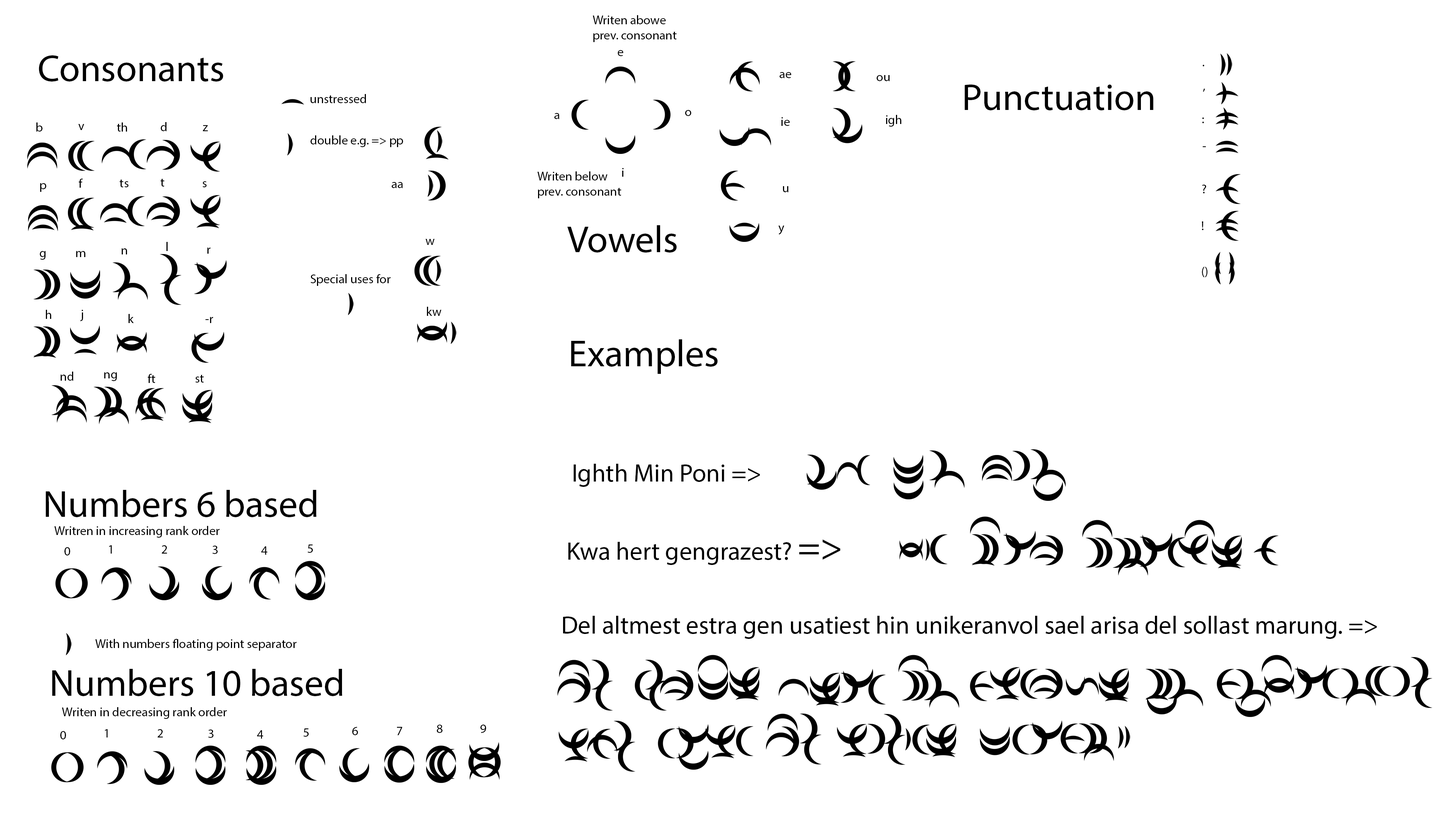
<style>
.page{position:relative;width:1456px;height:819px;background:#ffffff}
.page>*{position:absolute;margin:0}
.t1{font:12.6px "MyriadPro-Regular";color:#000000}
.t2{font:37.9px "MyriadPro-Regular";color:#000000}
.t3{font:25.3px "MyriadPro-Regular";color:#000000}
</style>
<div class="page">
<p class="t1" style="left:593px;top:15px;width:84px;height:27px">Writen abowe<br>prev. consonant</p>
<p class="t1" style="left:618px;top:50px;width:5px;height:6px">e</p>
<p class="t2" style="left:39px;top:55px;width:184px;height:27px">Consonants</p>
<p class="t1" style="left:1203px;top:64px;width:1px;height:2px">.</p>
<p class="t1" style="left:780px;top:72px;width:11px;height:6px">ae</p>
<p class="t1" style="left:877px;top:75px;width:13px;height:6px">ou</p>
<p class="t2" style="left:965px;top:85px;width:188px;height:25px">Punctuation</p>
<p class="t1" style="left:1203px;top:88px;width:2px;height:4px">,</p>
<p class="t1" style="left:311px;top:94px;width:55px;height:9px">unstressed</p>
<p class="t1" style="left:554px;top:113px;width:5px;height:6px">a</p>
<p class="t1" style="left:685px;top:110px;width:6px;height:6px">o</p>
<p class="t1" style="left:36px;top:122px;width:6px;height:10px">b</p>
<p class="t1" style="left:78px;top:124px;width:6px;height:6px">v</p>
<p class="t1" style="left:117px;top:122px;width:10px;height:10px">th</p>
<p class="t1" style="left:161px;top:122px;width:5px;height:9px">d</p>
<p class="t1" style="left:203px;top:125px;width:5px;height:6px">z</p>
<p class="t1" style="left:781px;top:117px;width:9px;height:9px">ie</p>
<p class="t1" style="left:886px;top:115px;width:15px;height:12px">igh</p>
<p class="t1" style="left:1202px;top:117px;width:2px;height:6px">:</p>
<p class="t1" style="left:311px;top:135px;width:92px;height:12px">double e.g. =&gt; pp</p>
<p class="t1" style="left:1203px;top:146px;width:3px;height:1px">-</p>
<p class="t1" style="left:537px;top:171px;width:84px;height:27px">Writen below<br>prev. consonant</p>
<p class="t1" style="left:622px;top:168px;width:2px;height:9px">i</p>
<p class="t1" style="left:40px;top:183px;width:6px;height:9px">p</p>
<p class="t1" style="left:78px;top:179px;width:5px;height:9px">f</p>
<p class="t1" style="left:119px;top:179px;width:10px;height:8px">ts</p>
<p class="t1" style="left:160px;top:179px;width:5px;height:8px">t</p>
<p class="t1" style="left:202px;top:181px;width:5px;height:6px">s</p>
<p class="t1" style="left:392px;top:182px;width:11px;height:6px">aa</p>
<p class="t1" style="left:1202px;top:185px;width:4px;height:8px">?</p>
<p class="t1" style="left:783px;top:186px;width:5px;height:6px">u</p>
<p class="t1" style="left:1202px;top:221px;width:1px;height:9px">!</p>
<p class="t2" style="left:567px;top:225px;width:110px;height:28px">Vowels</p>
<p class="t1" style="left:778px;top:226px;width:6px;height:9px">y</p>
<p class="t1" style="left:425px;top:239px;width:10px;height:6px">w</p>
<p class="t1" style="left:40px;top:251px;width:5px;height:9px">g</p>
<p class="t1" style="left:76px;top:251px;width:9px;height:6px">m</p>
<p class="t1" style="left:122px;top:248px;width:5px;height:6px">n</p>
<p class="t1" style="left:207px;top:248px;width:3px;height:6px">r</p>
<p class="t1" style="left:1202px;top:267px;width:6px;height:10px">()</p>
<p class="t1" style="left:311px;top:274px;width:80px;height:12px">Special uses for</p>
<p class="t1" style="left:46px;top:310px;width:5px;height:9px">h</p>
<p class="t1" style="left:80px;top:310px;width:3px;height:11px">j</p>
<p class="t1" style="left:129px;top:314px;width:5px;height:9px">k</p>
<p class="t1" style="left:206px;top:317px;width:7px;height:6px">-r</p>
<p class="t1" style="left:427px;top:307px;width:14px;height:9px">kw</p>
<p class="t2" style="left:571px;top:339px;width:147px;height:35px">Examples</p>
<p class="t1" style="left:61px;top:372px;width:12px;height:9px">nd</p>
<p class="t1" style="left:104px;top:372px;width:13px;height:9px">ng</p>
<p class="t1" style="left:147px;top:374px;width:8px;height:9px">ft</p>
<p class="t1" style="left:195px;top:375px;width:9px;height:8px">st</p>
<p class="t3" style="left:574px;top:464px;width:186px;height:23px">Ighth Min Poni =&gt;</p>
<p class="t2" style="left:45px;top:490px;width:272px;height:27px">Numbers 6 based</p>
<p class="t1" style="left:54px;top:526px;width:166px;height:12px">Writren in increasing rank order</p>
<p class="t1" style="left:109px;top:545px;width:3px;height:9px">1</p>
<p class="t1" style="left:162px;top:545px;width:5px;height:9px">2</p>
<p class="t1" style="left:212px;top:546px;width:6px;height:8px">3</p>
<p class="t1" style="left:308px;top:544px;width:5px;height:9px">5</p>
<p class="t3" style="left:568px;top:539px;width:272px;height:26px">Kwa hert gengrazest? <span class="t2">=&gt;</span></p>
<p class="t1" style="left:64px;top:547px;width:6px;height:8px">0</p>
<p class="t1" style="left:261px;top:546px;width:6px;height:9px">4</p>
<p class="t3" style="left:563px;top:616px;width:814px;height:23px">Del altmest estra gen usatiest hin unikeranvol sael arisa del sollast marung. =&gt;</p>
<p class="t1" style="left:95px;top:639px;width:202px;height:12px">With numbers floating point separator</p>
<p class="t2" style="left:52px;top:669px;width:290px;height:27px">Numbers 10 based</p>
<p class="t1" style="left:62px;top:707px;width:165px;height:12px">Writen in decreasing rank order</p>
<p class="t1" style="left:437px;top:725px;width:5px;height:8px">8</p>
<p class="t1" style="left:480px;top:725px;width:6px;height:8px">9</p>
<p class="t1" style="left:60px;top:731px;width:6px;height:8px">0</p>
<p class="t1" style="left:105px;top:729px;width:3px;height:8px">1</p>
<p class="t1" style="left:157px;top:729px;width:6px;height:8px">2</p>
<p class="t1" style="left:208px;top:730px;width:5px;height:8px">3</p>
<p class="t1" style="left:257px;top:730px;width:6px;height:9px">4</p>
<p class="t1" style="left:303px;top:728px;width:6px;height:9px">5</p>
<p class="t1" style="left:352px;top:727px;width:6px;height:8px">6</p>
<p class="t1" style="left:397px;top:727px;width:5px;height:8px">7</p>
</div>
